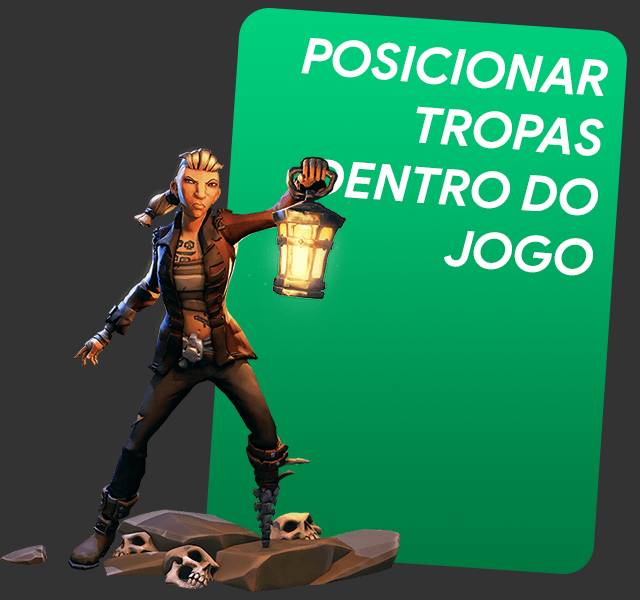
<style>
.page{position:relative;width:640px;height:600px;background:#333333}
.page>*{position:absolute;margin:0}
.t1{font:50px "ProductSans-BoldItalic";color:#ffffff}
</style>
<div class="page">
<p class="t1" style="left:301px;top:38px;width:307px;height:238px;text-align:right;rotate:4deg">POSICIONAR<br>TROPAS<br>DENTRO DO<br>JOGO</p>
</div>
